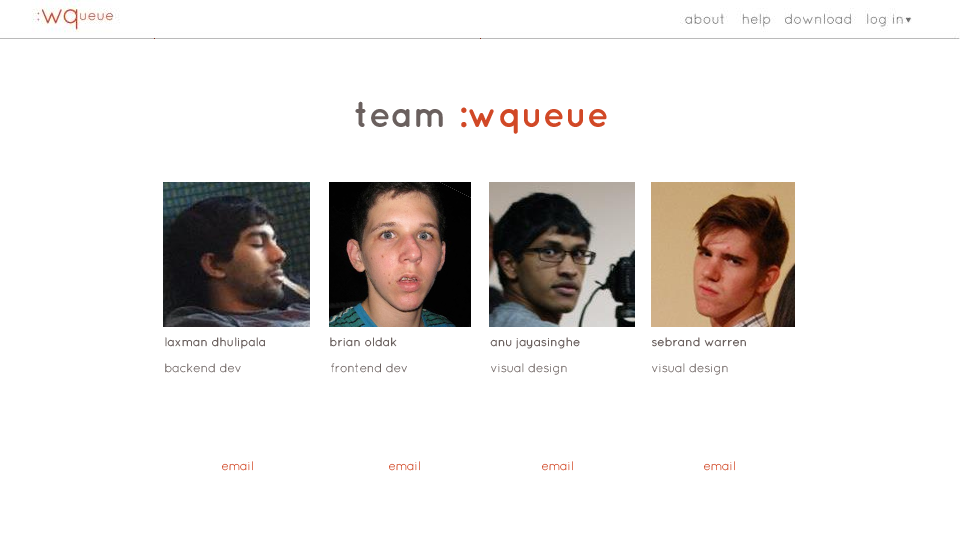
<style>
.page{position:relative;width:960px;height:540px;background:#ffffff}
.page>*{position:absolute;margin:0}
.t1{font:36px "Quicksand-Bold";color:#d14826}
.t2{font:36px "Quicksand-Bold";color:#6a605e}
.t3{font:12px "Quicksand-Regular";color:#6a605e}
.t4{font:12px "Quicksand-Light";color:#6a605e}
.t5{font:12px "Quicksand-Light";color:#d14826}
</style>
<div class="page">
<p class="t1" style="left:355px;top:101px;width:252px;height:33px"><span class="t2">team </span>:wqueue</p>
<p class="t3" style="left:165px;top:337px;width:100px;height:12px">laxman dhulipala</p>
<p class="t3" style="left:330px;top:337px;width:67px;height:10px">brian oldak</p>
<p class="t3" style="left:490px;top:337px;width:90px;height:12px">anu jayasinghe</p>
<p class="t3" style="left:652px;top:337px;width:94px;height:10px">sebrand warren</p>
<p class="t4" style="left:165px;top:363px;width:76px;height:10px">backend dev</p>
<p class="t4" style="left:331px;top:363px;width:76px;height:10px">frontend dev</p>
<p class="t4" style="left:491px;top:363px;width:76px;height:12px">visual design</p>
<p class="t4" style="left:652px;top:363px;width:76px;height:12px">visual design</p>
<p class="t5" style="left:222px;top:461px;width:31px;height:10px">email</p>
<p class="t5" style="left:389px;top:461px;width:31px;height:10px">email</p>
<p class="t5" style="left:542px;top:461px;width:31px;height:10px">email</p>
<p class="t5" style="left:704px;top:461px;width:31px;height:10px">email</p>
</div>
